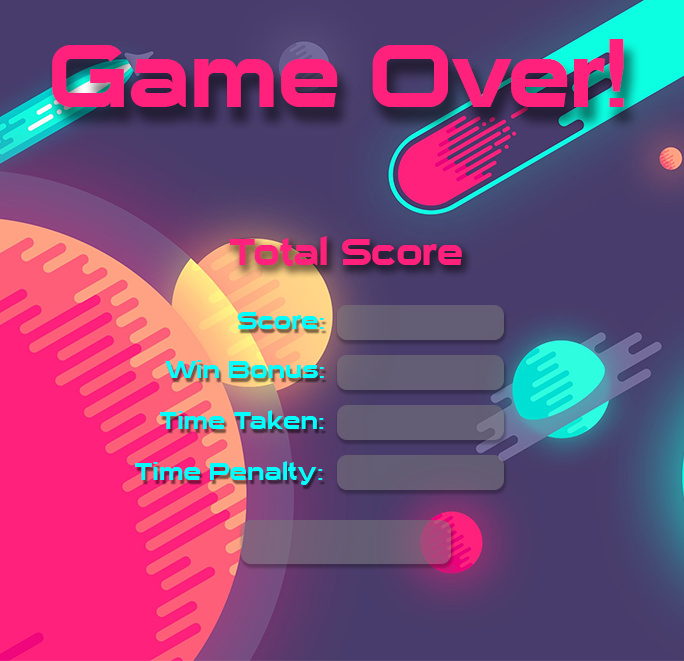
<style>
.page{position:relative;width:684px;height:661px}
.page>*{position:absolute;margin:0}
.t1{font:86px "SuiGenerisFree";color:#ff217c}
.t2{font:36px "SuiGenerisFree";color:#ff217c}
.t3{font:24px "SuiGenerisFree";color:#02ffff}
</style>
<div class="page">
<p class="t1" style="left:52px;top:39px;width:572px;height:68px">Game Over!</p>
<p class="t2" style="left:229px;top:236px;width:233px;height:30px">Total Score</p>
<p class="t3" style="left:237px;top:312px;width:87px;height:17px">Score:</p>
<p class="t3" style="left:165px;top:360px;width:159px;height:18px">Win Bonus:</p>
<p class="t3" style="left:160px;top:410px;width:164px;height:19px">Time Taken:</p>
<p class="t3" style="left:135px;top:461px;width:188px;height:24px">Time Penalty:</p>
</div>
